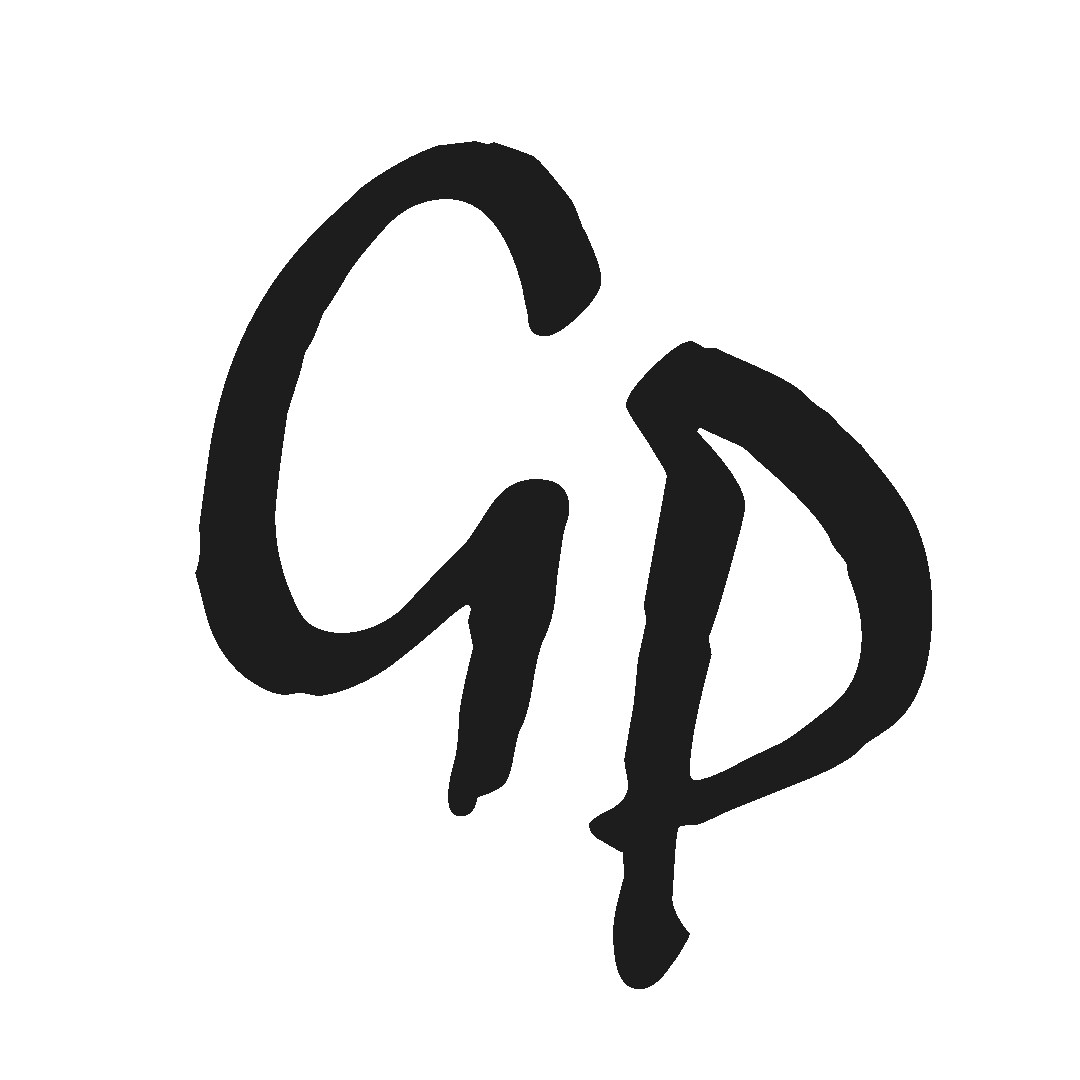
<style>
.page{position:relative;width:1080px;height:1080px;background:#ffffff}
.page>*{position:absolute;margin:0}
.t1{font:833.3px "Mistral";letter-spacing:0.005em;color:#1d1d1d}
</style>
<div class="page">
<p class="t1" style="left:195px;top:141px;width:406px;height:675px">G</p>
<p class="t1" style="left:589px;top:341px;width:343px;height:648px">P</p>
</div>
